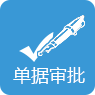
<style>
.page{position:relative;width:95px;height:95px;background:#3998d6}
.page>*{position:absolute;margin:0}
.t1{font:18px "MicrosoftYaHei";color:#ffffff}
</style>
<div class="page">
<p class="t1" style="left:13px;top:67px;width:72px;height:17px">单据审批</p>
</div>
